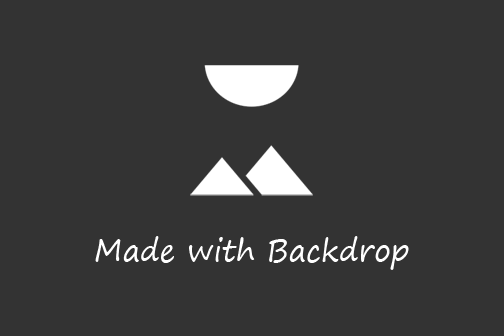
<style>
.page{position:relative;width:504px;height:336px;background:#333333}
.page>*{position:absolute;margin:0}
.t1{font:29.9px "SegoePrint";color:#ffffff}
</style>
<div class="page">
<p class="t1" style="left:95px;top:236px;width:314px;height:34px">Made with Backdrop</p>
</div>
